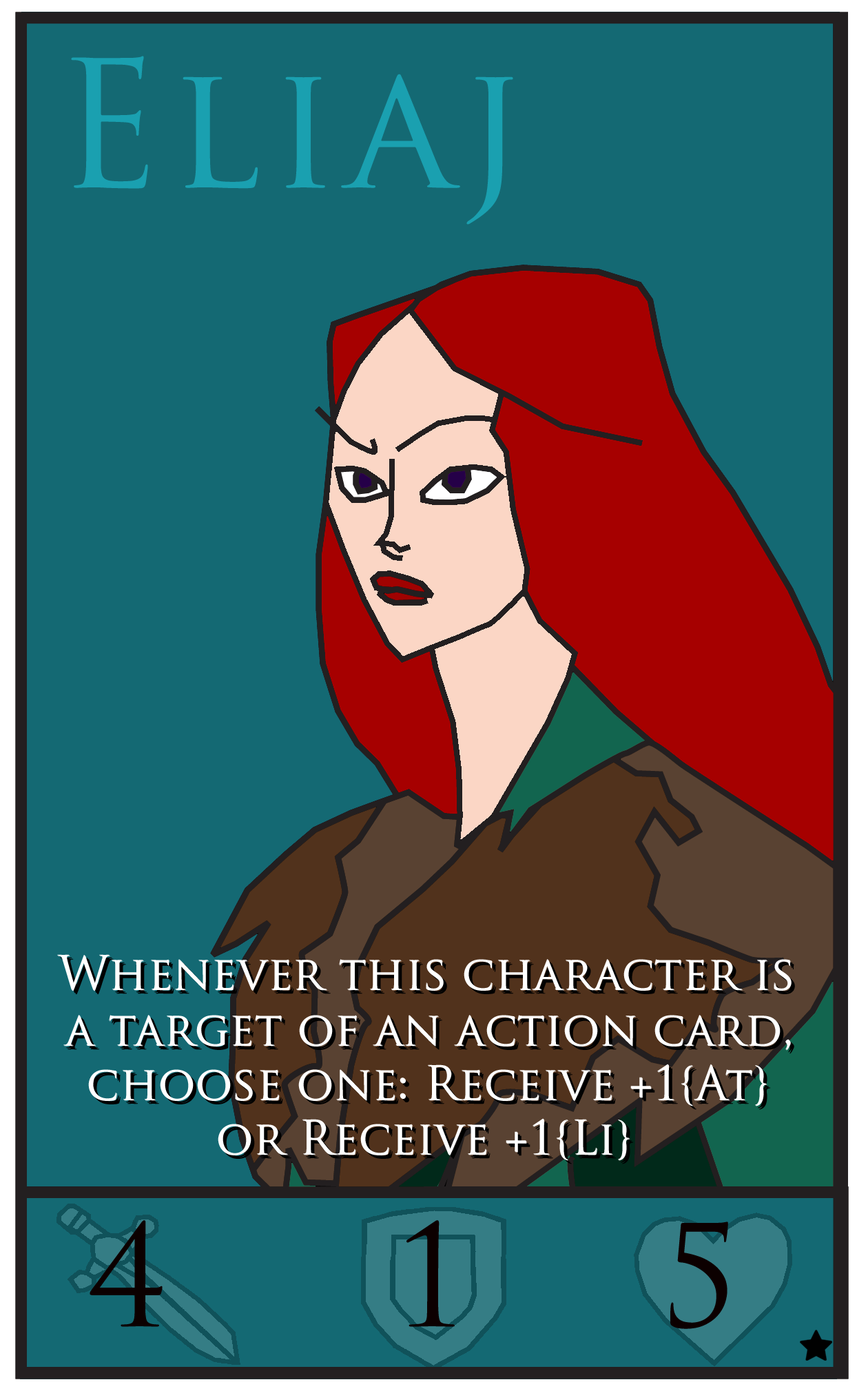
<style>
.page{position:relative;width:857px;height:1391px;background:#146973}
.page>*{position:absolute;margin:0}
.t1{font:45.9px "TrajanPro-Regular";color:#ffffff}
.t2{font:51.7px "TrajanPro-Regular";color:#ffffff}
</style>
<div class="page">
<p class="t1" style="left:57px;top:954px;width:734px;height:37px">Whenever this character is</p>
<p class="t1" style="left:58px;top:955px;width:734px;height:37px">Whenever this character is</p>
<p class="t1" style="left:63px;top:1015px;width:727px;height:35px">a target of an action card,</p>
<p class="t1" style="left:64px;top:1016px;width:727px;height:35px">a target of an action card,</p>
<p class="t1" style="left:88px;top:1064px;width:679px;height:42px">choose one: Receive +1{At}</p>
<p class="t1" style="left:89px;top:1065px;width:679px;height:42px">choose one: Receive +1{At}</p>
<p class="t1" style="left:218px;top:1118px;width:412px;height:42px"><span class="t2"> </span>or Receive +1{Li}</p>
<p class="t1" style="left:218px;top:1119px;width:412px;height:42px"><span class="t2"> </span>or Receive +1{Li}</p>
</div>
